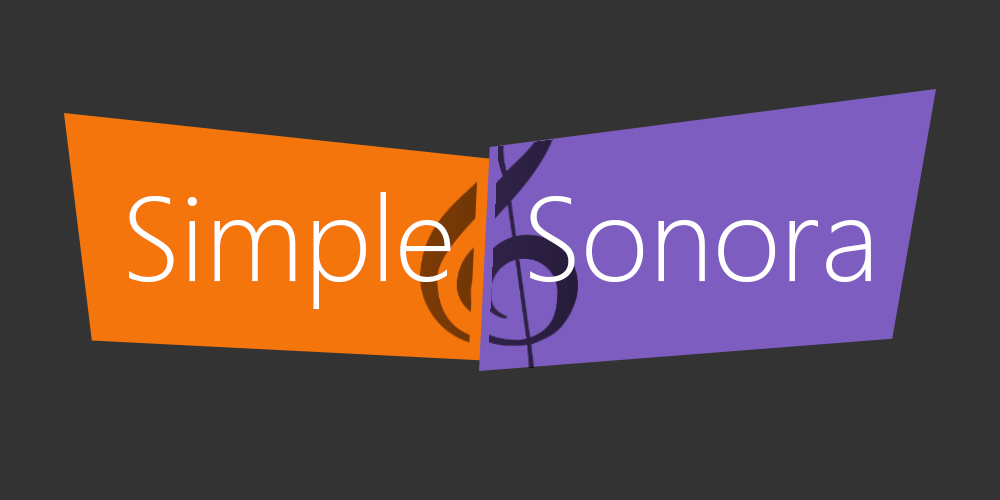
<style>
.page{position:relative;width:1000px;height:500px;background:#333333}
.page>*{position:absolute;margin:0}
.t1{font:120px "SegoeUI-Light";color:#ffffff}
</style>
<div class="page">
<p class="t1" style="left:129px;top:192px;width:742px;height:117px">Simple  Sonora</p>
</div>
